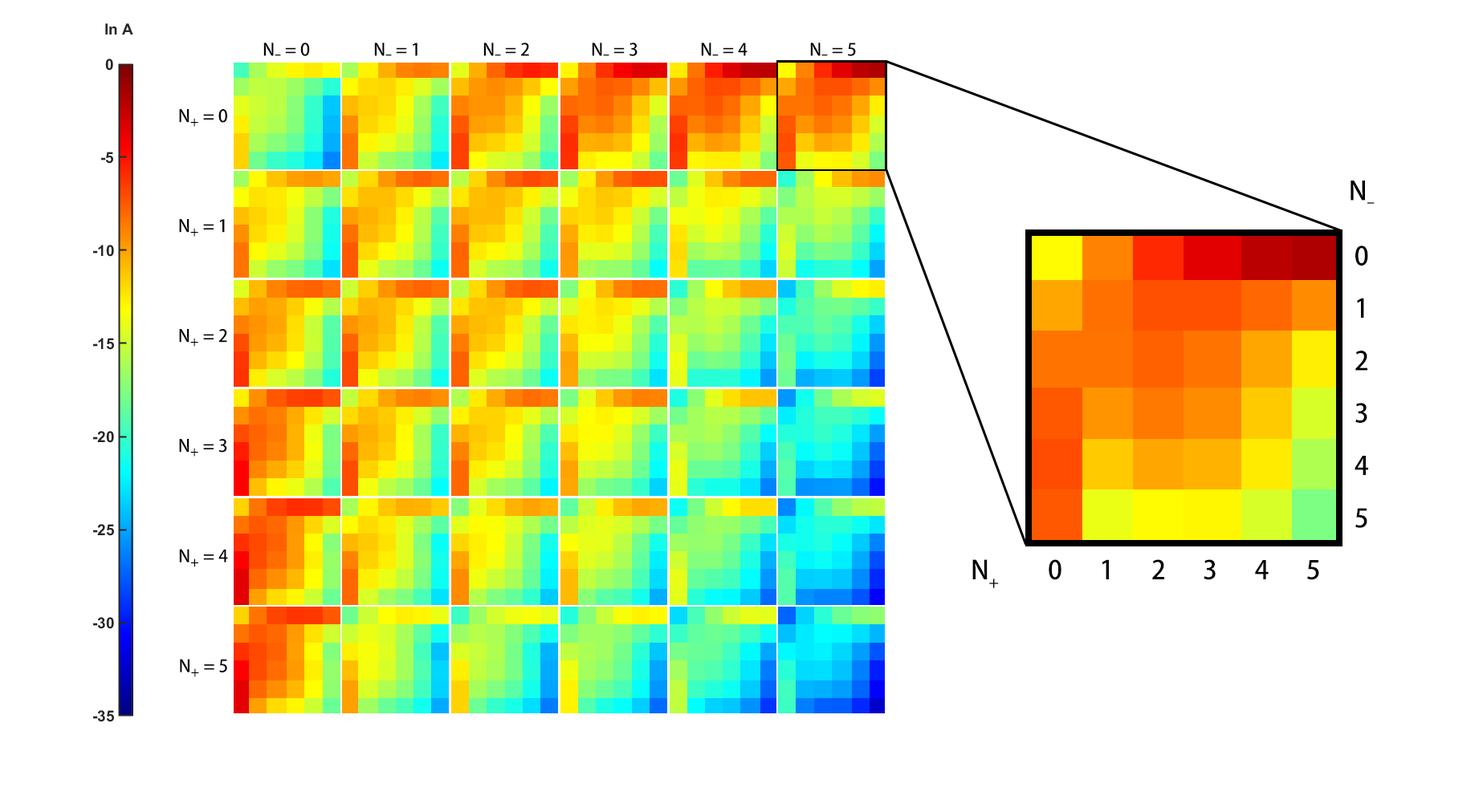
<style>
.page{position:relative;width:1483px;height:804px;background:#ffffff}
.page>*{position:absolute;margin:0}
.t1{font:17.1px "AdobeHeitiStd-Regular";color:#000000}
.t2{font:12.8px "AdobeHeitiStd-Regular";color:#000000}
.t3{font:25.7px/52.4px "AdobeHeitiStd-Regular";color:#000000}
.t4{font:25.7px "AdobeHeitiStd-Regular";color:#000000}
.t5{font:25.7px "AdobeHeitiStd-Regular";letter-spacing:1.45em;color:#000000}
</style>
<div class="page">
<p class="t1" style="left:263px;top:43px;width:47px;height:13px">N<span class="t2">-</span> = 0</p>
<p class="t1" style="left:374px;top:43px;width:43px;height:13px">N<span class="t2">-</span> = 1</p>
<p class="t1" style="left:483px;top:43px;width:46px;height:13px">N<span class="t2">-</span> = 2</p>
<p class="t1" style="left:592px;top:43px;width:45px;height:13px">N<span class="t2">-</span> = 3</p>
<p class="t1" style="left:701px;top:43px;width:46px;height:13px">N<span class="t2">-</span> = 4</p>
<p class="t1" style="left:810px;top:43px;width:46px;height:13px">N<span class="t2">-</span> = 5</p>
<p class="t1" style="left:179px;top:109px;width:48px;height:18px">N<span class="t2">+</span> = 0</p>
<p class="t3" style="left:1350px;top:181px;width:24px;height:347px;text-align:center"><span class="t4">N-<br></span>0<br>1<br>2<br>3<br>4<br>5</p>
<p class="t1" style="left:179px;top:219px;width:46px;height:18px">N<span class="t2">+</span> = 1</p>
<p class="t1" style="left:179px;top:329px;width:48px;height:18px">N<span class="t2">+</span> = 2</p>
<p class="t1" style="left:179px;top:439px;width:48px;height:18px">N<span class="t2">+</span> = 3</p>
<p class="t1" style="left:179px;top:549px;width:49px;height:19px">N<span class="t2">+</span> = 4</p>
<p class="t5" style="left:972px;top:559px;width:347px;height:29px"><span class="t4">N+ </span> 012345</p>
<p class="t1" style="left:180px;top:659px;width:47px;height:18px">N<span class="t2">+</span> = 5</p>
</div>
